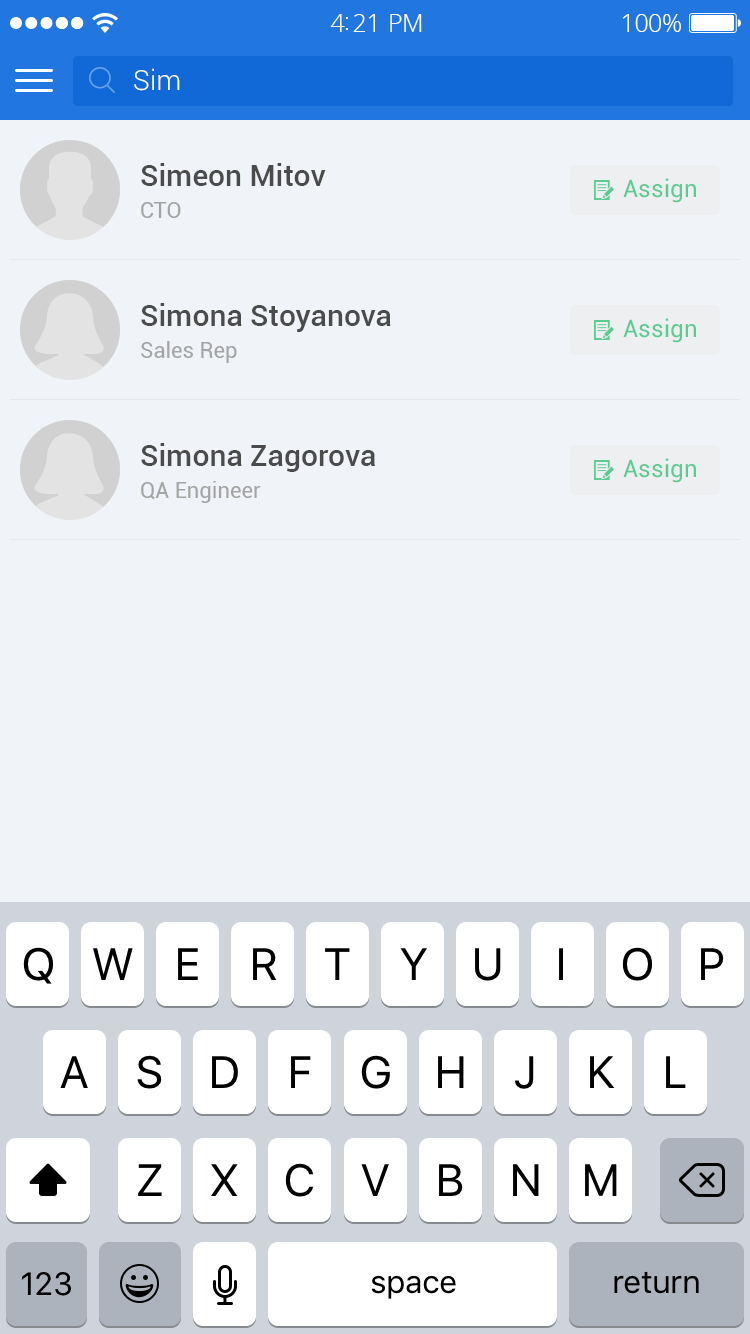
<style>
.page{position:relative;width:750px;height:1334px;background:#f0f4f8}
.page>*{position:absolute;margin:0}
.t1{font:25px "OpenSans-Light";letter-spacing:-0.02em;color:#ffffff}
.t2{font:28px "Roboto-Light";color:#ffffff}
.t3{font:30px/32px "Roboto-Medium";color:#4b4b4b}
.t4{font:22px/32px "Roboto-Regular";color:#a4a4a4}
.t5{font:24px "Roboto-Regular";color:#5acc90}
.t6{font:45px "SFUIDisplay-Regular";color:#000000;text-transform:uppercase}
.t7{font:32px "SFUIText-Regular";letter-spacing:-0.02em;color:#000000}
</style>
<div class="page">
<p class="t1" style="left:330px;top:14px;width:92px;height:18px">4:21 PM</p>
<p class="t1" style="left:622px;top:14px;width:59px;height:18px">100%</p>
<p class="t2" style="left:134px;top:68px;width:46px;height:23px">Sim</p>
<p class="t3" style="left:141px;top:163px;width:185px;height:55px">Simeon Mitov<br><span class="t4">CTO</span></p>
<p class="t5" style="left:623px;top:178px;width:73px;height:25px">Assign</p>
<p class="t3" style="left:141px;top:303px;width:250px;height:60px">Simona Stoyanova<br><span class="t4">Sales Rep</span></p>
<p class="t5" style="left:623px;top:318px;width:73px;height:25px">Assign</p>
<p class="t3" style="left:141px;top:443px;width:234px;height:60px">Simona Zagorova<br><span class="t4">QA Engineer</span></p>
<p class="t5" style="left:623px;top:458px;width:73px;height:25px">Assign</p>
<p class="t6" style="left:23px;top:947px;width:31px;height:37px">q</p>
<p class="t6" style="left:93px;top:948px;width:40px;height:32px">w</p>
<p class="t6" style="left:178px;top:948px;width:20px;height:32px">e</p>
<p class="t6" style="left:253px;top:948px;width:24px;height:32px">r</p>
<p class="t6" style="left:325px;top:948px;width:25px;height:32px">t</p>
<p class="t6" style="left:400px;top:948px;width:27px;height:32px">y</p>
<p class="t6" style="left:475px;top:948px;width:26px;height:33px">u</p>
<p class="t6" style="left:559px;top:948px;width:4px;height:32px">i</p>
<p class="t6" style="left:622px;top:947px;width:31px;height:34px">o</p>
<p class="t6" style="left:701px;top:948px;width:23px;height:32px">p</p>
<p class="t6" style="left:60px;top:1056px;width:28px;height:32px">a</p>
<p class="t6" style="left:137px;top:1055px;width:25px;height:34px">s</p>
<p class="t6" style="left:212px;top:1056px;width:26px;height:32px">d</p>
<p class="t6" style="left:291px;top:1056px;width:20px;height:32px">f</p>
<p class="t6" style="left:361px;top:1055px;width:29px;height:34px">g</p>
<p class="t6" style="left:438px;top:1056px;width:26px;height:32px">h</p>
<p class="t6" style="left:515px;top:1056px;width:19px;height:33px">j</p>
<p class="t6" style="left:590px;top:1056px;width:25px;height:32px">k</p>
<p class="t6" style="left:666px;top:1056px;width:20px;height:32px">l</p>
<p class="t6" style="left:138px;top:1164px;width:24px;height:32px">z</p>
<p class="t6" style="left:211px;top:1164px;width:27px;height:32px">x</p>
<p class="t6" style="left:285px;top:1163px;width:29px;height:34px">c</p>
<p class="t6" style="left:361px;top:1164px;width:28px;height:32px">v</p>
<p class="t6" style="left:439px;top:1164px;width:24px;height:32px">b</p>
<p class="t6" style="left:513px;top:1164px;width:26px;height:32px">n</p>
<p class="t6" style="left:585px;top:1164px;width:32px;height:32px">m</p>
<p class="t7" style="left:21px;top:1272px;width:50px;height:24px">123</p>
<p class="t7" style="left:371px;top:1275px;width:85px;height:24px">space</p>
<p class="t7" style="left:614px;top:1271px;width:85px;height:23px">return</p>
</div>
